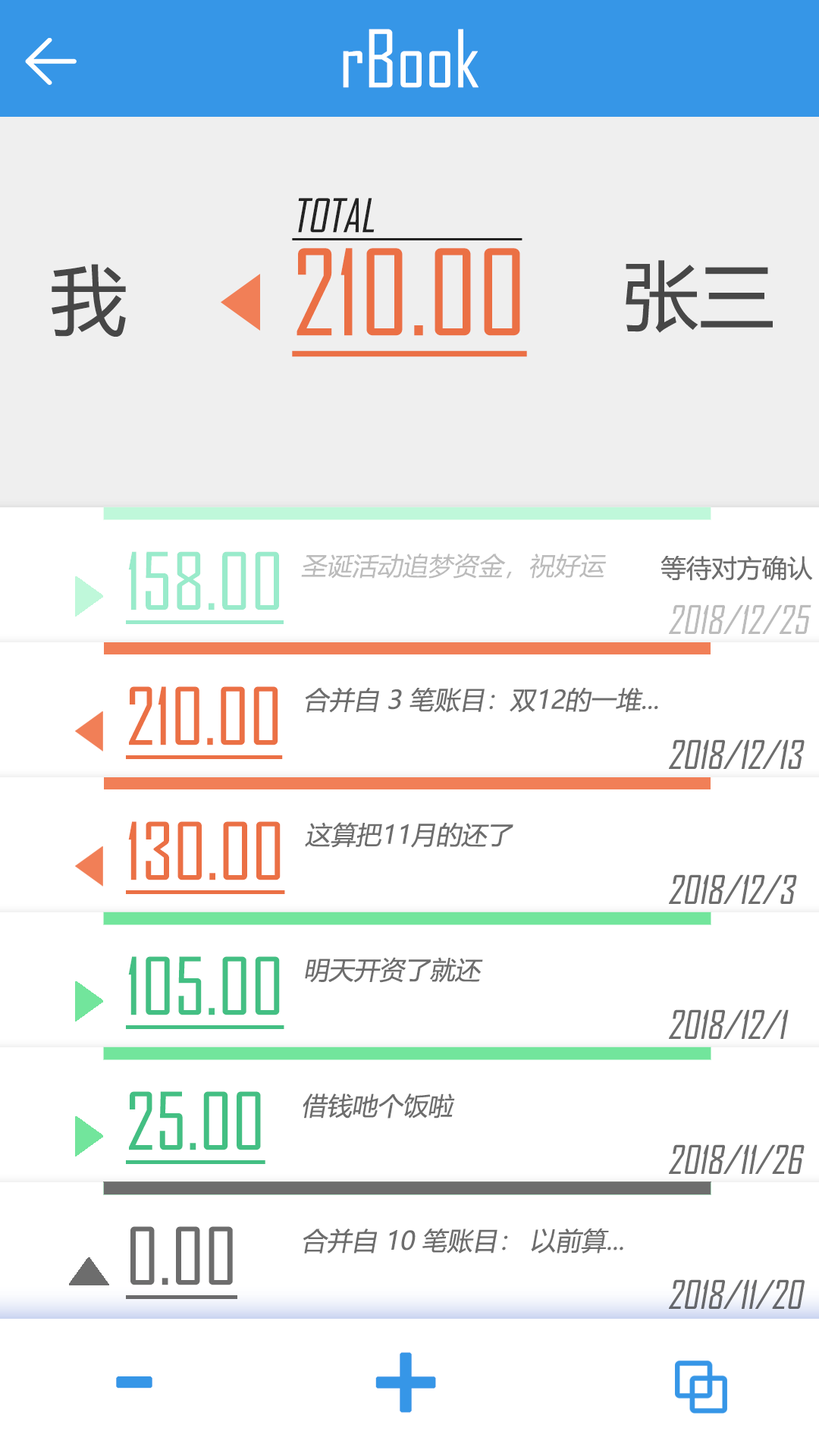
<style>
.page{position:relative;width:819px;height:1456px;background:#ffffff}
.page>*{position:absolute;margin:0}
.t1{font:75.8px "AgencyFB-Reg";color:#ffffff}
.t2{font:44.2px "AgencyFB-Reg";color:#232323;text-transform:uppercase;font-style:italic;text-decoration:underline}
.t3{font:113.7px "AgencyFB-Reg";color:#eb7045;text-decoration:underline}
.t4{font:75.8px "MicrosoftYaHei";color:#474747}
.t5{font:25.3px "MicrosoftYaHei";color:#6d6d6d}
.t6{font:75.8px "AgencyFB-Reg";color:#eb7045;text-decoration:underline}
.t7{font:25.3px "MicrosoftYaHei";color:#6d6d6d;font-style:italic}
.t8{font:37.9px "AgencyFB-Reg";color:#6d6d6d;font-style:italic}
.t9{font:75.8px "AgencyFB-Reg";color:#43bf83;text-decoration:underline}
.t10{font:75.8px "AgencyFB-Reg";color:#6d6d6d;text-decoration:underline}
.t11{font:113.7px "MicrosoftYaHei";color:#3696e7;font-weight:bold}
</style>
<div class="page">
<p class="t1" style="left:343px;top:29px;width:136px;height:59px">rBook</p>
<p class="t2" style="left:292px;top:198px;width:230px;height:42px">Total</p>
<p class="t3" style="left:292px;top:248px;width:235px;height:109px">210.00</p>
<p class="t4" style="left:52px;top:264px;width:74px;height:73px">我</p>
<p class="t4" style="left:626px;top:260px;width:147px;height:73px">张三</p>
<p class="t5" style="left:660px;top:556px;width:153px;height:25px">等待对方确认</p>
<p class="t6" style="left:126px;top:686px;width:157px;height:73px">210.00</p>
<p class="t7" style="left:305px;top:687px;width:353px;height:26px">合并自 3 笔账目：双12的一堆...</p>
<p class="t8" style="left:669px;top:739px;width:136px;height:30px">2018/12/13</p>
<p class="t6" style="left:126px;top:821px;width:159px;height:73px">130.00</p>
<p class="t7" style="left:305px;top:822px;width:208px;height:26px">这算把11月的还了</p>
<p class="t8" style="left:669px;top:874px;width:128px;height:30px">2018/12/3</p>
<p class="t9" style="left:126px;top:956px;width:158px;height:73px">105.00</p>
<p class="t7" style="left:305px;top:957px;width:178px;height:26px">明天开资了就还</p>
<p class="t8" style="left:669px;top:1009px;width:120px;height:30px">2018/12/1</p>
<p class="t9" style="left:126px;top:1091px;width:139px;height:73px">25.00</p>
<p class="t7" style="left:303px;top:1094px;width:152px;height:25px">借钱吔个饭啦</p>
<p class="t8" style="left:669px;top:1144px;width:136px;height:30px">2018/11/26</p>
<p class="t10" style="left:126px;top:1226px;width:111px;height:73px">0.00</p>
<p class="t7" style="left:303px;top:1228px;width:320px;height:26px">合并自 10 笔账目： 以前算...</p>
<p class="t8" style="left:669px;top:1279px;width:136px;height:30px">2018/11/20</p>
<p class="t11" style="left:375px;top:1352px;width:61px;height:61px">+</p>
<p class="t11" style="left:116px;top:1376px;width:36px;height:12px">-</p>
</div>
